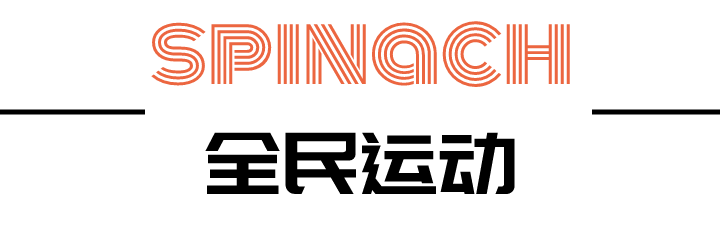
<style>
.page{position:relative;width:720px;height:225px;background:#ffffff}
.page>*{position:absolute;margin:0}
.t1{font:85px "Monoton-Regular";color:#ec6640}
.t2{font:85px "PangMenZhengDao";color:#000000}
</style>
<div class="page">
<p class="t1" style="left:151px;top:21px;width:419px;height:66px">spinach</p>
<p class="t2" style="left:205px;top:132px;width:310px;height:63px">全民运动</p>
</div>
